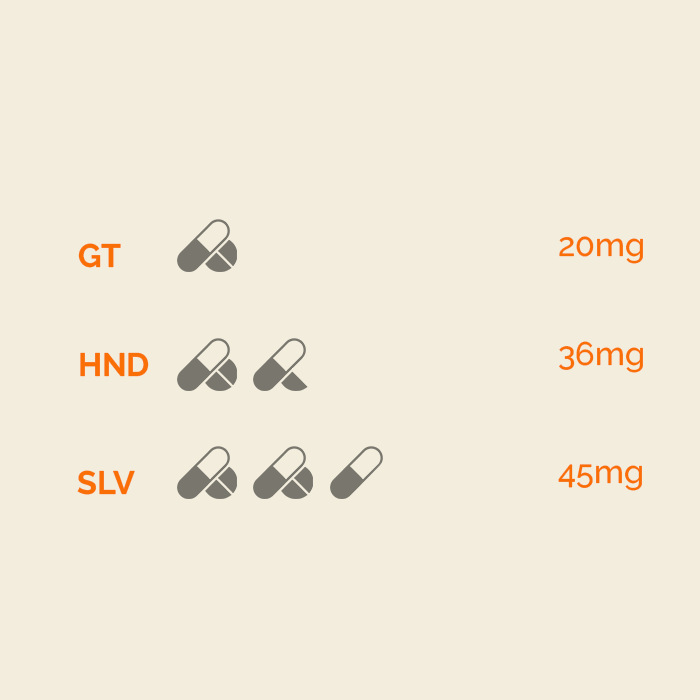
<style>
.page{position:relative;width:700px;height:700px;background:#f2eddc}
.page>*{position:absolute;margin:0}
.t1{font:32.5px "RalewayRoman-Bold";color:#fa6e06}
.t2{font:32.5px "RalewayRoman-Medium";color:#fa6e06}
</style>
<div class="page">
<p class="t1" style="left:78px;top:243px;width:43px;height:25px">GT</p>
<p class="t2" style="left:559px;top:236px;width:84px;height:28px">20mg</p>
<p class="t2" style="left:559px;top:341px;width:84px;height:32px">36mg</p>
<p class="t1" style="left:80px;top:352px;width:69px;height:25px">HND</p>
<p class="t1" style="left:77px;top:470px;width:58px;height:25px">SLV</p>
<p class="t2" style="left:558px;top:464px;width:84px;height:27px">45mg</p>
</div>
